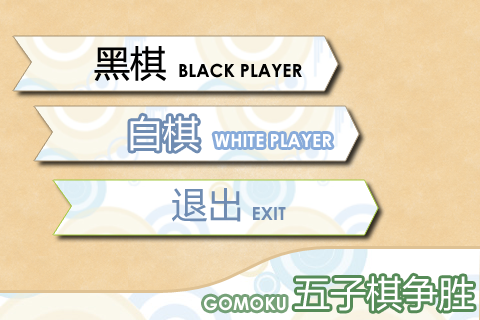
<style>
.page{position:relative;width:480px;height:320px}
.page>*{position:absolute;margin:0}
.t1{font:36px "MicrosoftYaHei";color:#010101}
.t2{font:18px "CenturyGothic-Bold";color:#010101}
.t3{font:36px "MicrosoftYaHei";color:#ffffff}
.t4{font:18px "CenturyGothic-Bold";color:#ffffff}
.t5{font:36px "MicrosoftYaHei";color:#6f8cb2}
.t6{font:18px "CenturyGothic-Bold";color:#6f8cb2}
</style>
<div class="page">
<p class="t1" style="left:94px;top:46px;width:72px;height:35px">黑棋</p>
<p class="t2" style="left:179px;top:63px;width:123px;height:15px">BLACK PLAYER</p>
<p class="t3" style="left:130px;top:115px;width:69px;height:36px">白棋</p>
<p class="t4" style="left:214px;top:134px;width:118px;height:13px">WHITE PLAYER</p>
<p class="t5" style="left:172px;top:188px;width:69px;height:34px">退出</p>
<p class="t6" style="left:253px;top:207px;width:33px;height:13px">EXIT</p>
<p class="t3" style="left:294px;top:275px;width:180px;height:36px">五子棋争胜</p>
<p class="t4" style="left:204px;top:296px;width:82px;height:15px">GOMOKU</p>
</div>
